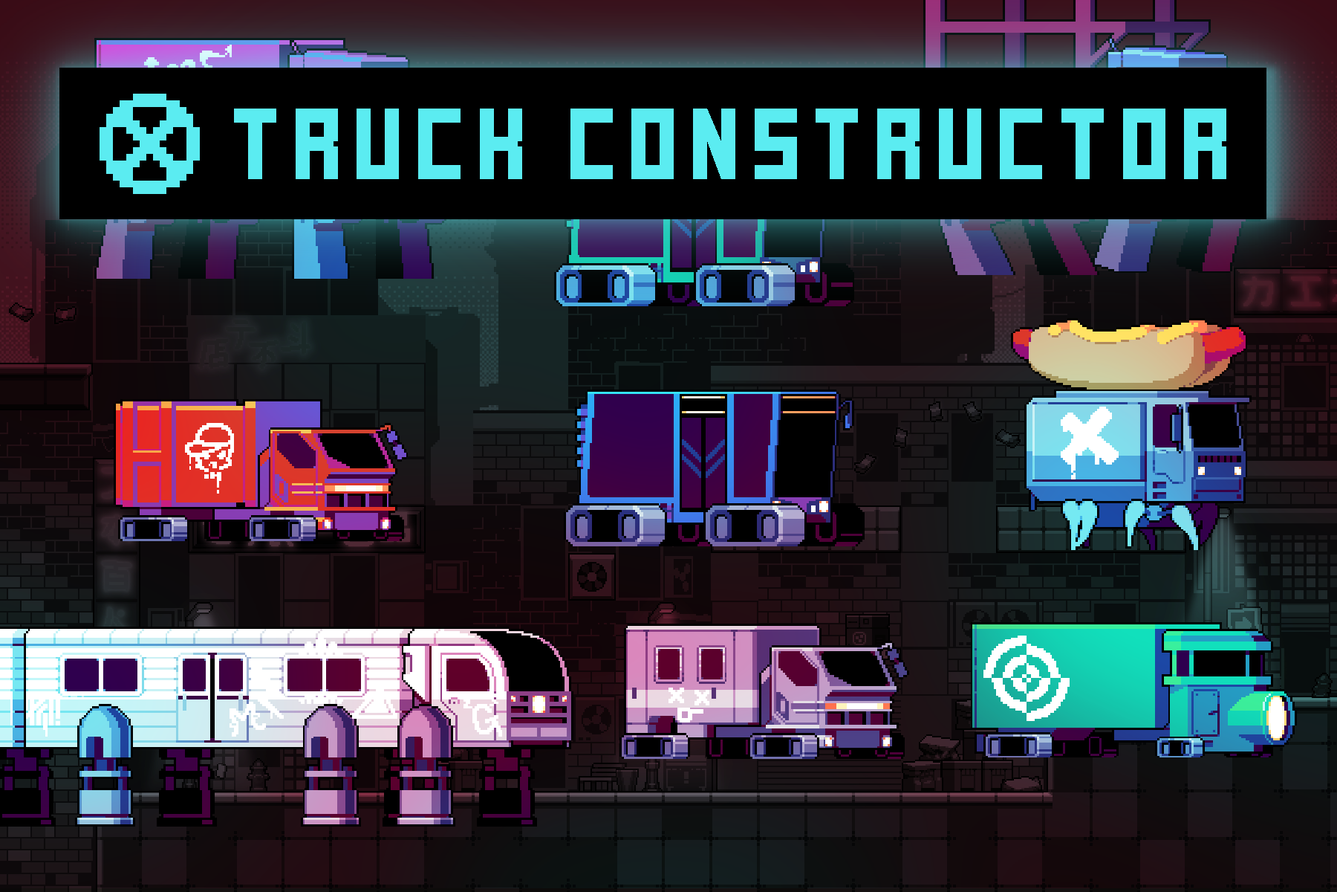
<style>
.page{position:relative;width:1337px;height:892px}
.page>*{position:absolute;margin:0}
.t1{font:96.9px "FutureMillennium";color:#5becf1}
</style>
<div class="page">
<p class="t1" style="left:234px;top:108px;width:993px;height:71px">truck constructor</p>
</div>
